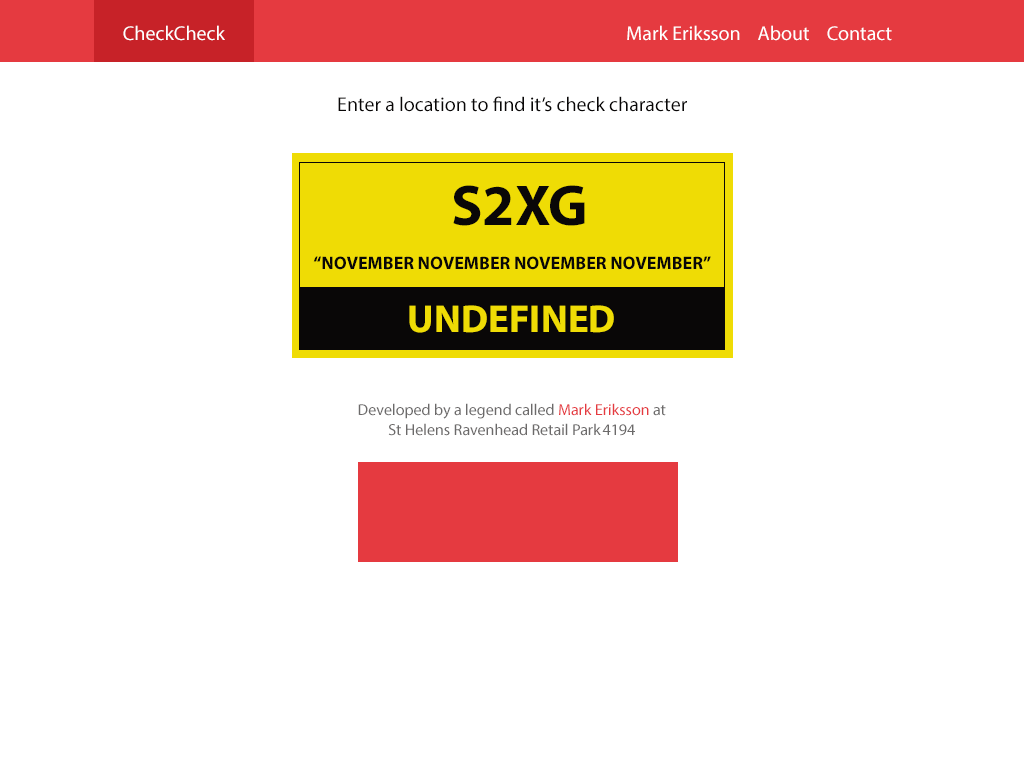
<style>
.page{position:relative;width:1024px;height:768px;background:#ffffff}
.page>*{position:absolute;margin:0}
.t1{font:20px "MyriadPro-Regular";color:#ffffff}
.t2{font:20px "MyriadPro-Regular";color:#090707}
.t3{font:58px "MyriadPro-Bold";color:#090707}
.t4{font:18px "MyriadPro-Bold";color:#090707}
.t5{font:39px "MyriadPro-Bold";color:#efdc05}
.t6{font:16px "MyriadPro-Regular";color:#6c6a6a}
.t7{font:16px "MyriadPro-Regular";color:#e53a40}
</style>
<div class="page">
<p class="t1" style="left:123px;top:25px;width:102px;height:16px">CheckCheck</p>
<p class="t1" style="left:627px;top:25px;width:265px;height:16px">Mark Eriksson    About    Contact</p>
<p class="t2" style="left:338px;top:96px;width:349px;height:16px">Enter a location to find it’s check character</p>
<p class="t3" style="left:453px;top:185px;width:132px;height:41px">S2XG</p>
<p class="t4" style="left:313px;top:256px;width:398px;height:14px">“NOVEMBER NOVEMBER NOVEMBER NOVEMBER”</p>
<p class="t5" style="left:409px;top:305px;width:205px;height:28px">UNDEFINED</p>
<p class="t6" style="left:358px;top:403px;width:308px;height:33px;text-align:center">Developed by a legend called <span class="t7">Mark Eriksson </span>at<br>St Helens Ravenhead Retail Park 4194</p>
</div>
